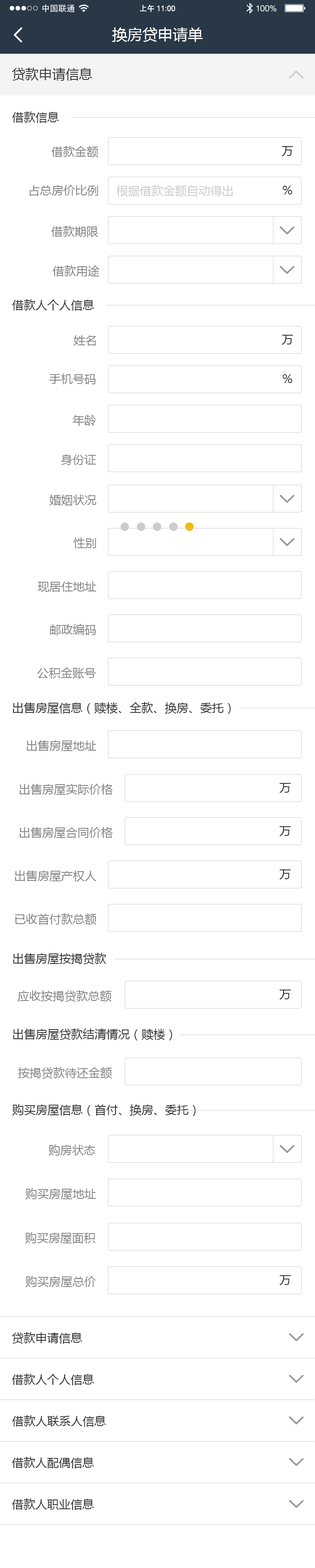
<style>
.page{position:relative;width:315px;height:1568px;background:#ffffff}
.page>*{position:absolute;margin:0}
.t1{font:8.4px "STHeiti";color:#ffffff}
.t2{font:7.6px "MicrosoftSansSerif";color:#ffffff}
.t3{font:7.6px "STHeiti";color:#ffffff}
.t4{font:8.4px "MicrosoftSansSerif";color:#ffffff}
.t5{font:15.1px "MicrosoftYaHei";color:#ffffff}
.t6{font:13.4px "MicrosoftYaHei";color:#333333}
.t7{font:11.8px "MicrosoftYaHei";color:#333333}
.t8{font:11.8px "MicrosoftYaHei";color:#848484}
.t9{font:11.8px "MicrosoftYaHei";color:#cccccc}
</style>
<div class="page">
<p class="t1" style="left:42px;top:4px;width:33px;height:8px">中国联通</p>
<p class="t2" style="left:140px;top:5px;width:35px;height:7px"><span class="t3">上午 </span>11:00</p>
<p class="t4" style="left:256px;top:5px;width:20px;height:7px">100%</p>
<p class="t5" style="left:112px;top:27px;width:91px;height:15px">换房贷申请单</p>
<p class="t6" style="left:12px;top:68px;width:80px;height:13px">贷款申请信息</p>
<p class="t7" style="left:12px;top:111px;width:47px;height:12px">借款信息</p>
<p class="t8" style="left:51px;top:146px;width:47px;height:12px">借款金额</p>
<p class="t7" style="left:282px;top:146px;width:11px;height:10px">万</p>
<p class="t8" style="left:29px;top:185px;width:69px;height:11px">占总房价比例</p>
<p class="t9" style="left:116px;top:185px;width:117px;height:12px">根据借款金额自动得出</p>
<p class="t7" style="left:283px;top:186px;width:9px;height:8px">％</p>
<p class="t8" style="left:51px;top:226px;width:47px;height:11px">借款期限</p>
<p class="t8" style="left:53px;top:265px;width:47px;height:11px">借款用途</p>
<p class="t7" style="left:12px;top:299px;width:83px;height:12px">借款人个人信息</p>
<p class="t8" style="left:74px;top:335px;width:22px;height:11px">姓名</p>
<p class="t7" style="left:282px;top:335px;width:11px;height:10px">万</p>
<p class="t8" style="left:49px;top:373px;width:47px;height:11px">手机号码</p>
<p class="t7" style="left:283px;top:374px;width:9px;height:9px">％</p>
<p class="t8" style="left:73px;top:415px;width:23px;height:11px">年龄</p>
<p class="t8" style="left:61px;top:454px;width:35px;height:11px">身份证</p>
<p class="t8" style="left:49px;top:494px;width:47px;height:12px">婚姻状况</p>
<p class="t8" style="left:73px;top:537px;width:23px;height:12px">性别</p>
<p class="t8" style="left:38px;top:581px;width:59px;height:11px">现居住地址</p>
<p class="t8" style="left:50px;top:624px;width:46px;height:12px">邮政编码</p>
<p class="t8" style="left:37px;top:667px;width:59px;height:12px">公积金账号</p>
<p class="t7" style="left:13px;top:702px;width:218px;height:12px">出售房屋信息（赎楼、全款、换房、委托）</p>
<p class="t8" style="left:27px;top:740px;width:70px;height:11px">出售房屋地址</p>
<p class="t8" style="left:20px;top:784px;width:93px;height:11px">出售房屋实际价格</p>
<p class="t7" style="left:279px;top:783px;width:12px;height:10px">万</p>
<p class="t8" style="left:20px;top:827px;width:93px;height:11px">出售房屋合同价格</p>
<p class="t7" style="left:279px;top:826px;width:12px;height:10px">万</p>
<p class="t7" style="left:279px;top:869px;width:12px;height:11px">万</p>
<p class="t8" style="left:15px;top:870px;width:82px;height:12px">出售房屋产权人</p>
<p class="t8" style="left:15px;top:913px;width:82px;height:12px">已收首付款总额</p>
<p class="t7" style="left:13px;top:953px;width:93px;height:11px">出售房屋按揭贷款</p>
<p class="t7" style="left:279px;top:990px;width:12px;height:10px">万</p>
<p class="t8" style="left:17px;top:990px;width:95px;height:12px">应收按揭贷款总额</p>
<p class="t7" style="left:13px;top:1028px;width:159px;height:12px">出售房屋贷款结清情况（赎楼）</p>
<p class="t8" style="left:18px;top:1067px;width:94px;height:12px">按揭贷款待还金额</p>
<p class="t7" style="left:12px;top:1104px;width:184px;height:12px">购买房屋信息（首付、换房、委托）</p>
<p class="t8" style="left:48px;top:1144px;width:47px;height:12px">购房状态</p>
<p class="t8" style="left:25px;top:1188px;width:71px;height:12px">购买房屋地址</p>
<p class="t8" style="left:25px;top:1232px;width:71px;height:12px">购买房屋面积</p>
<p class="t8" style="left:25px;top:1276px;width:71px;height:11px">购买房屋总价</p>
<p class="t7" style="left:279px;top:1275px;width:12px;height:10px">万</p>
</div>
